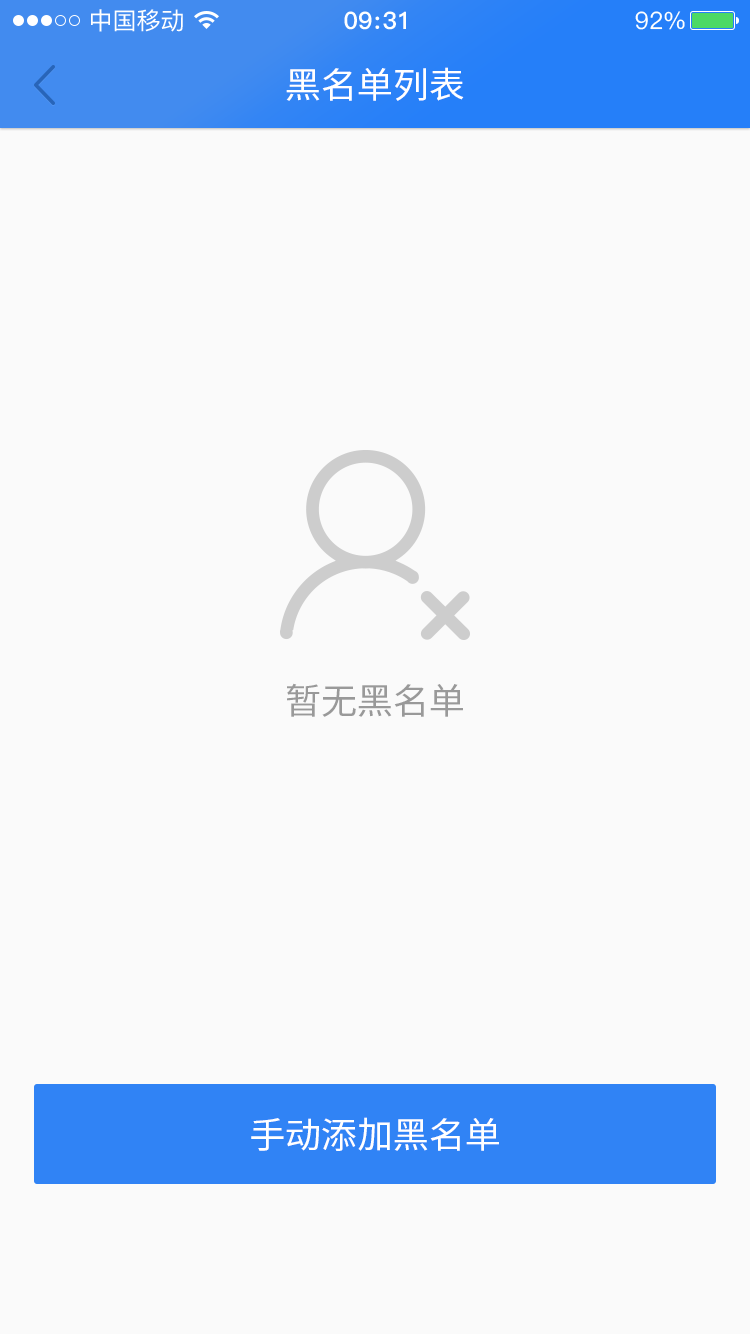
<style>
.page{position:relative;width:750px;height:1334px;background:#fafafa}
.page>*{position:absolute;margin:0}
.t1{font:36px "SourceHanSansCN-Regular";color:#ffffff}
.t2{font:36px "SourceHanSansCN-Regular";color:#999999}
</style>
<div class="page">
<p class="t1" style="left:286px;top:67px;width:178px;height:34px">黑名单列表</p>
<p class="t2" style="left:287px;top:683px;width:176px;height:34px">暂无黑名单</p>
<p class="t1" style="left:251px;top:1117px;width:248px;height:34px">手动添加黑名单</p>
</div>
